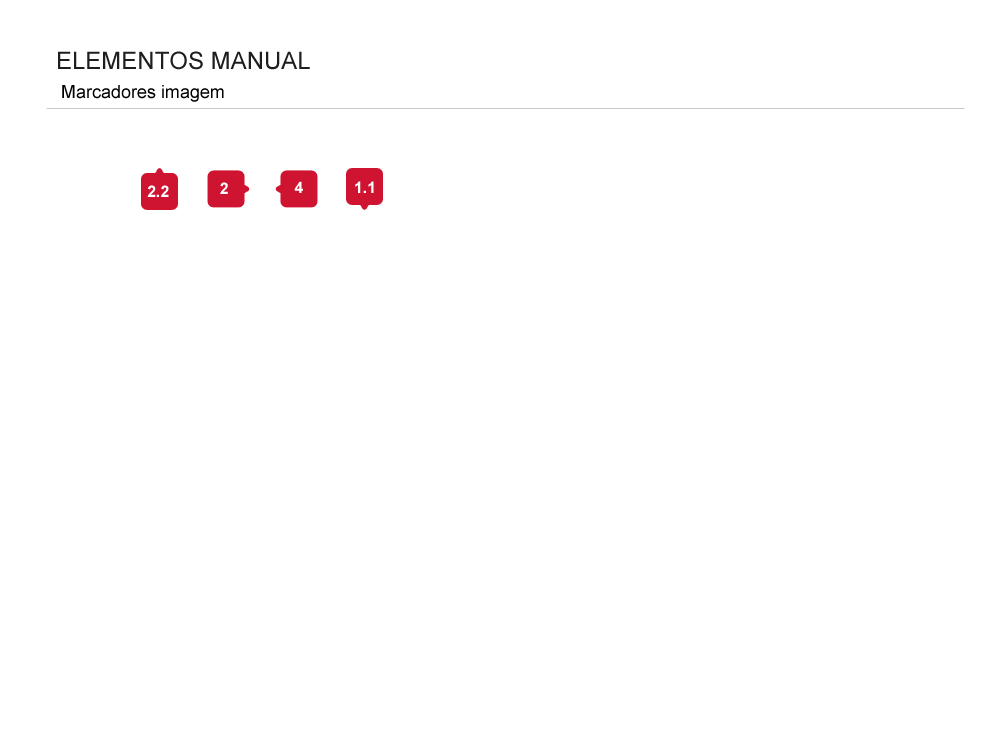
<style>
.page{position:relative;width:1000px;height:750px;background:#ffffff}
.page>*{position:absolute;margin:0}
.t1{font:24px "ArialMT";color:#1e1e1e;text-transform:uppercase}
.t2{font:18px "ArialMT";color:#000000}
.t3{font:16px "Arial-BoldMT";color:#ffffff}
</style>
<div class="page">
<p class="t1" style="left:58px;top:51px;width:252px;height:19px">elementos manual</p>
<p class="t2" style="left:62px;top:85px;width:162px;height:17px">Marcadores imagem</p>
<p class="t3" style="left:147px;top:185px;width:22px;height:12px">2.2</p>
<p class="t3" style="left:220px;top:182px;width:8px;height:12px">2</p>
<p class="t3" style="left:294px;top:181px;width:9px;height:12px">4</p>
<p class="t3" style="left:355px;top:181px;width:19px;height:12px">1.1</p>
</div>
